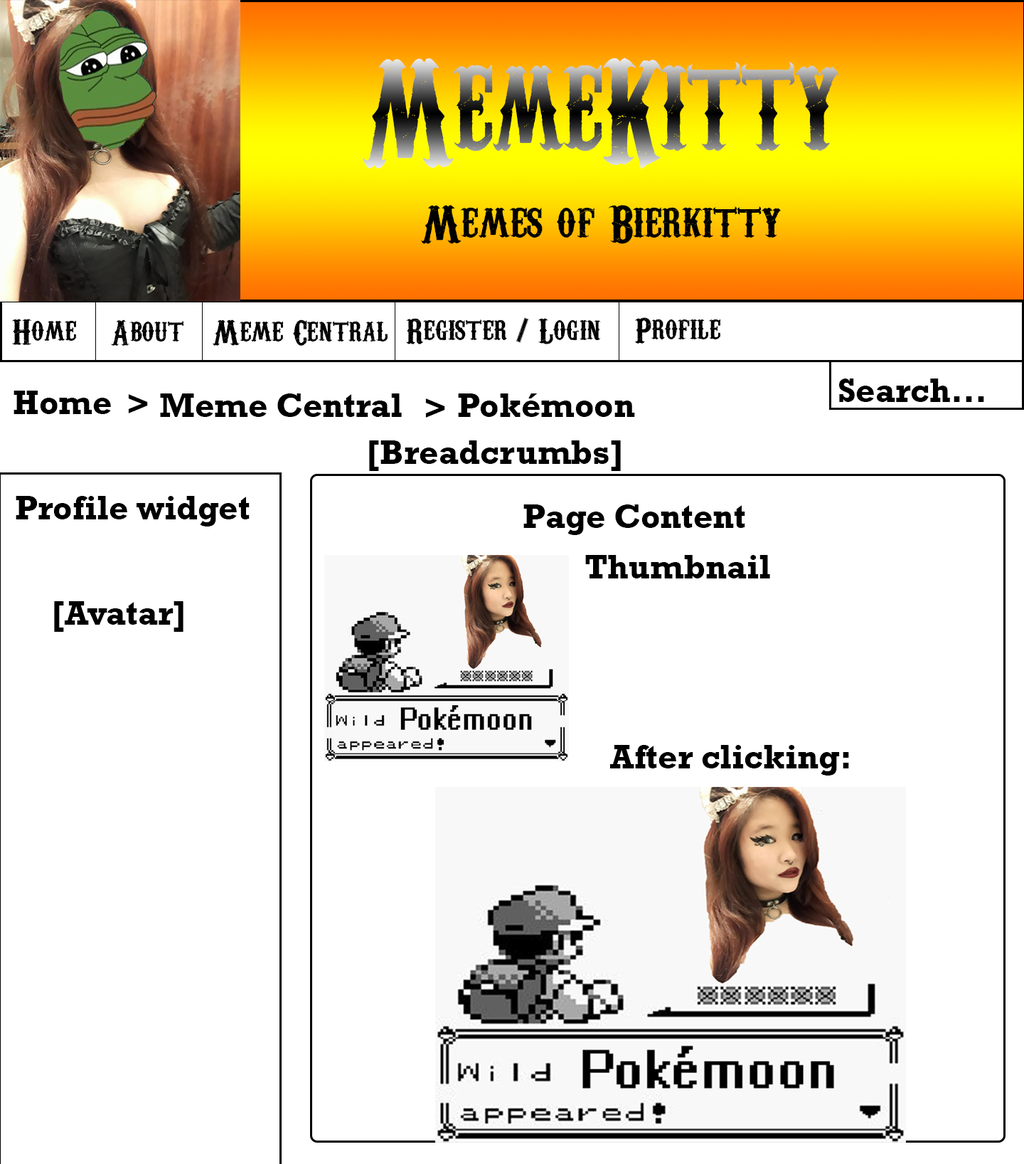
<style>
.page{position:relative;width:1024px;height:1164px;background:#ffffff}
.page>*{position:absolute;margin:0}
.t1{font:146.2px "CarnivaleeFreakshow";scale:0.79 1}
.t2{font:51.2px "CarnivaleeFreakshow";color:#000000}
.t3{font:34.1px "CarnivaleeFreakshow";color:#000000}
.t4{font:34.1px "Rockwell-Bold";color:#000000}
</style>
<div class="page">
<p class="t1" style="left:363px;top:58px;width:477px;height:111px">MemeKitty</p>
<p class="t2" style="left:421px;top:205px;width:361px;height:39px">Memes of Bierkitty</p>
<p class="t3" style="left:406px;top:317px;width:195px;height:27px">Register / Login</p>
<p class="t3" style="left:635px;top:317px;width:86px;height:27px">Profile</p>
<p class="t3" style="left:12px;top:319px;width:64px;height:26px">Home</p>
<p class="t3" style="left:111px;top:319px;width:73px;height:27px">About</p>
<p class="t3" style="left:213px;top:319px;width:175px;height:27px">Meme Central</p>
<p class="t4" style="left:840px;top:378px;width:145px;height:24px">Search...</p>
<p class="t4" style="left:14px;top:391px;width:97px;height:23px">Home</p>
<p class="t4" style="left:128px;top:394px;width:20px;height:19px">&gt;</p>
<p class="t4" style="left:160px;top:393px;width:242px;height:24px">Meme Central</p>
<p class="t4" style="left:425px;top:398px;width:20px;height:20px">&gt;</p>
<p class="t4" style="left:458px;top:393px;width:177px;height:24px">Pokémoon</p>
<p class="t4" style="left:369px;top:440px;width:252px;height:31px">[Breadcrumbs]</p>
<p class="t4" style="left:16px;top:496px;width:234px;height:30px">Profile widget</p>
<p class="t4" style="left:524px;top:504px;width:222px;height:31px">Page Content</p>
<p class="t4" style="left:586px;top:555px;width:184px;height:23px">Thumbnail</p>
<p class="t4" style="left:54px;top:601px;width:130px;height:31px">[Avatar]</p>
<p class="t4" style="left:610px;top:745px;width:239px;height:30px">After clicking:</p>
</div>
